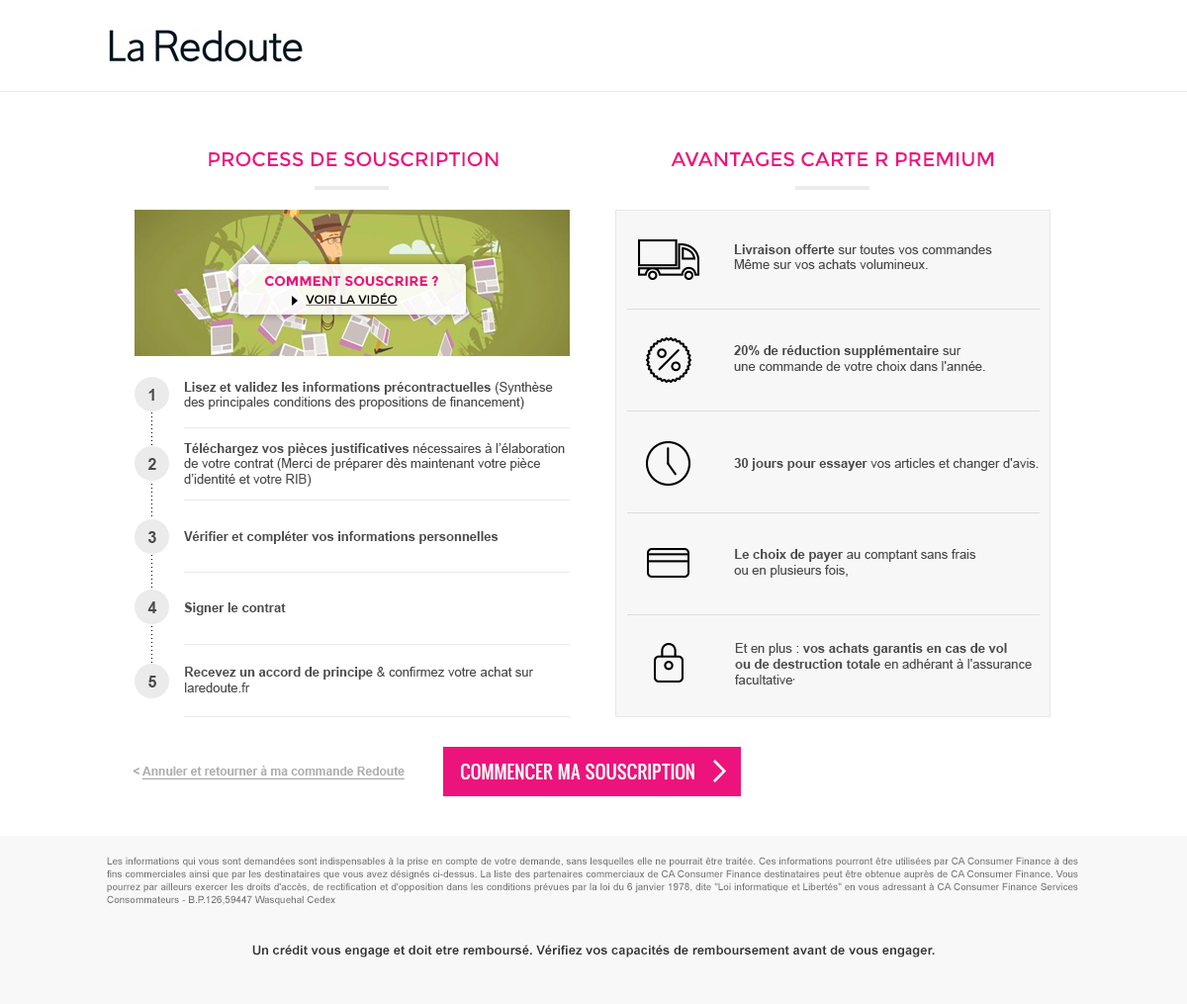
<style>
.page{position:relative;width:1187px;height:1004px;background:#ffffff}
.page>*{position:absolute;margin:0}
.t1{font:19.8px "Montserrat-Regular";color:#ed137d;text-transform:uppercase}
.t2{font:12.9px "ArialMT";color:#4b4b4c}
.t3{font:12.9px "Arial-BoldMT";color:#4b4b4c}
.t4{font:13.9px "Montserrat-Bold";color:#ed137d;text-transform:uppercase}
.t5{font:11.9px/17.8px "Montserrat-Regular";color:#000000;text-transform:uppercase;text-decoration:underline}
.t6{font:15.8px "Arial-BoldMT";color:#4b4b4c}
.t7{font:15.8px "ArialMT"}
.t8{font:11.9px "Arial-BoldMT";color:#adadad;text-decoration:underline}
.t9{font:11.9px "Arial-BoldMT";color:#adadad}
.t10{font:17.8px "Oswald";color:#ffffff;text-transform:uppercase}
</style>
<div class="page">
<p class="t1" style="left:209px;top:151px;width:290px;height:16px">Process de souscription</p>
<p class="t1" style="left:671px;top:151px;width:323px;height:16px">Avantages carte R PREMIUM</p>
<p class="t2" style="left:734px;top:244px;width:258px;height:25px"><span class="t3">Livraison offerte </span>sur toutes vos commandes<br>Même sur vos achats volumineux.</p>
<p class="t4" style="left:264px;top:275px;width:174px;height:31px;text-align:center">Comment souscrire ?<br><span class="t5">Voir la vidéo</span></p>
<p class="t2" style="left:734px;top:345px;width:251px;height:26px"><span class="t3">20% de réduction supplémentaire </span>sur<br>une commande de votre choix dans l'année.</p>
<p class="t6" style="left:148px;top:389px;width:6px;height:12px">1</p>
<p class="t2" style="left:184px;top:382px;width:369px;height:28px"><span class="t3">Lisez et validez les informations précontractuelles</span> (Synthèse des principales conditions des propositions de financement)</p>
<p class="t7" style="left:151px;top:401px;width:1px;height:286px;rotate:90deg">.........................................................................</p>
<p class="t2" style="left:184px;top:443px;width:381px;height:44px"><span class="t3">Téléchargez vos pièces justificatives</span> nécessaires à l’élaboration<br>de votre contrat (Merci de préparer dès maintenant votre pièce d’identité et votre RIB)</p>
<p class="t6" style="left:147px;top:458px;width:9px;height:12px">2</p>
<p class="t2" style="left:734px;top:458px;width:305px;height:13px"><span class="t3">30 jours pour essayer </span>vos articles et changer d'avis.</p>
<p class="t6" style="left:148px;top:531px;width:8px;height:12px">3</p>
<p class="t3" style="left:184px;top:531px;width:315px;height:13px">Vérifier et compléter vos informations personnelles</p>
<p class="t2" style="left:734px;top:549px;width:243px;height:29px"><span class="t3">Le choix de payer</span> au comptant sans frais<br>ou en plusieurs fois,</p>
<p class="t6" style="left:147px;top:602px;width:10px;height:11px">4</p>
<p class="t3" style="left:184px;top:603px;width:102px;height:12px">Signer le contrat</p>
<p class="t3" style="left:735px;top:643px;width:297px;height:42px"><span class="t2">Et en plus : </span>vos achats garantis en cas de vol<br>ou de destruction totale<span class="t2"> en adhérant à l'assurance facultative,</span></p>
<p class="t6" style="left:148px;top:676px;width:8px;height:12px">5</p>
<p class="t2" style="left:185px;top:667px;width:349px;height:26px"><span class="t3">Recevez un accord de principe</span> &amp; confirmez votre achat sur laredoute.fr</p>
<p class="t8" style="left:133px;top:766px;width:272px;height:14px"><span class="t9">&lt; </span>Annuler et retourner à ma commande Redoute</p>
<p class="t10" style="left:461px;top:764px;width:234px;height:16px">commencer ma souscription</p>
</div>
